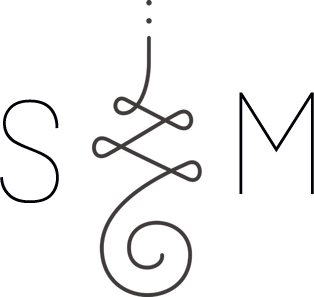
<style>
.page{position:relative;width:314px;height:297px;background:#ffffff}
.page>*{position:absolute;margin:0}
.t1{font:140px "GrotaSansAltThin_02365";letter-spacing:0.2em;color:#010005}
</style>
<div class="page">
<p class="t1" style="left:0px;top:99px;width:59px;height:104px">S</p>
<p class="t1" style="left:239px;top:92px;width:75px;height:102px">M</p>
</div>
